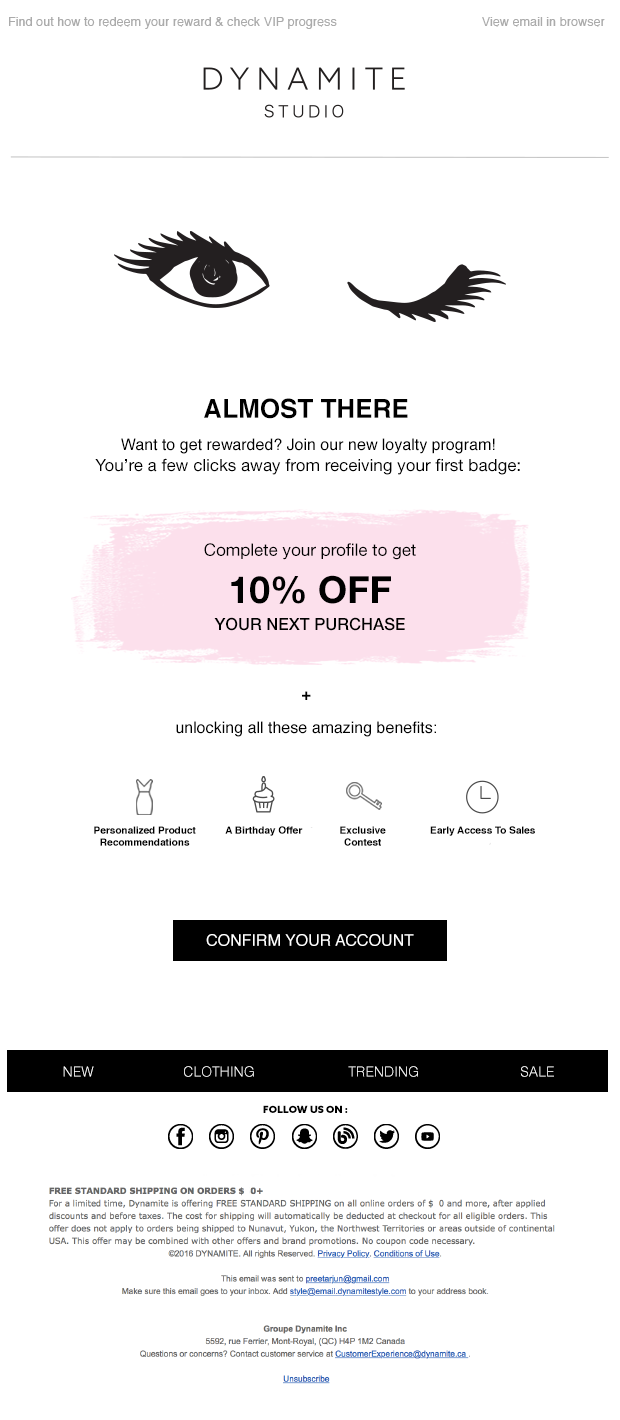
<style>
.page{position:relative;width:620px;height:1420px;background:#ffffff}
.page>*{position:absolute;margin:0}
.t1{font:26px "Helvetica-Bold";color:#000000;text-transform:uppercase}
.t2{font:17px/21px "HelveticaNeueLTStd-Roman";color:#000000}
.t3{font:16px "Helvetica";color:#000000}
.t4{font:17px/58.5px "HelveticaNeueLTStd-Roman";color:#000000}
.t5{font:17px/0px "HelveticaNeueLTStd-Roman";color:#000000}
.t6{font:37.5px/47.2px "HelveticaNeueLTStd-Bd";color:#000000}
.t7{font:16.7px/27.1px "HelveticaNeueLTStd-Md";color:#000000}
.t8{font:16px/33px "Helvetica";color:#000000}
.t9{font:16px "Helvetica-Bold";color:#000000}
.t10{font:10px "Helvetica-Bold";color:#000000}
.t11{font:16px "Helvetica";color:#ffffff;text-transform:uppercase}
.t12{font:14px "Helvetica-Light";color:#ffffff;text-transform:uppercase}
.t13{font:10px "AzoSans-Black";color:#000000;text-transform:uppercase}
</style>
<div class="page">
<p class="t1" style="left:204px;top:398px;width:204px;height:21px">Almost there</p>
<p class="t2" style="left:95px;top:438px;width:425px;height:37px;text-align:center"><span class="t3">Want to get rewarded? Join our new loyalty program!<br></span>You’re a few clicks away from receiving your first badge:</p>
<p class="t4" style="left:204px;top:543px;width:212px;height:88px;text-align:center"><span class="t5"><br><br></span>Complete your profile to get<br><span class="t6">10% OFF<br></span><span class="t7">YOUR NEXT PURCHASE</span></p>
<p class="t8" style="left:176px;top:691px;width:260px;height:46px;text-align:center"><span class="t9">+<br></span>unlocking all these amazing benefits:</p>
<p class="t10" style="left:94px;top:826px;width:102px;height:20px;text-align:center">Personalized Product<br>Recommendations</p>
<p class="t10" style="left:225px;top:826px;width:78px;height:10px">A Birthday Offer</p>
<p class="t10" style="left:340px;top:826px;width:46px;height:20px;text-align:center">Exclusive<br>Contest</p>
<p class="t10" style="left:430px;top:826px;width:105px;height:10px">Early Access To Sales</p>
<p class="t11" style="left:206px;top:934px;width:208px;height:12px">Confirm your account</p>
<p class="t12" style="left:63px;top:1066px;width:491px;height:11px">NEW                       CLOTHING                        TRENDING                          SALE</p>
<p class="t13" style="left:263px;top:1105px;width:85px;height:8px">FOLLOW US ON :</p>
</div>
